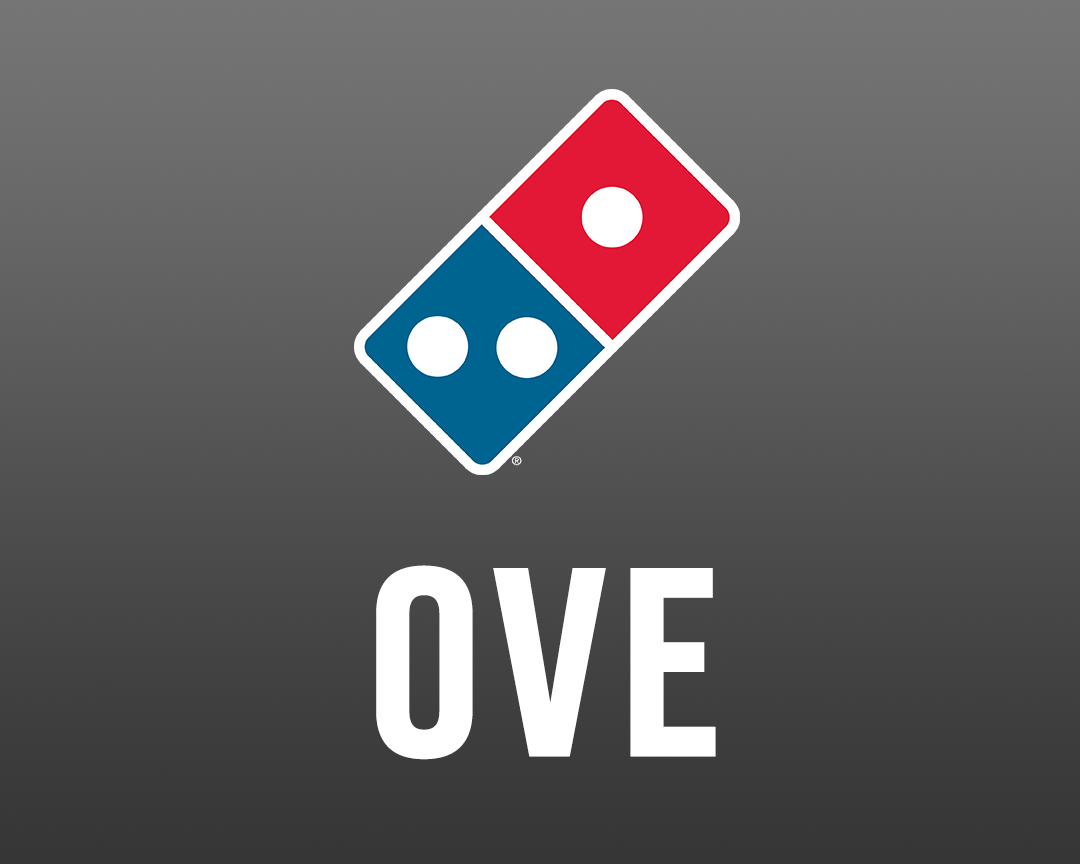
<style>
.page{position:relative;width:1080px;height:864px}
.page>*{position:absolute;margin:0}
.t1{font:259.2px "PizzaPress";color:#ffffff;font-weight:bold}
</style>
<div class="page">
<p class="t1" style="left:376px;top:565px;width:340px;height:195px">ove</p>
</div>
